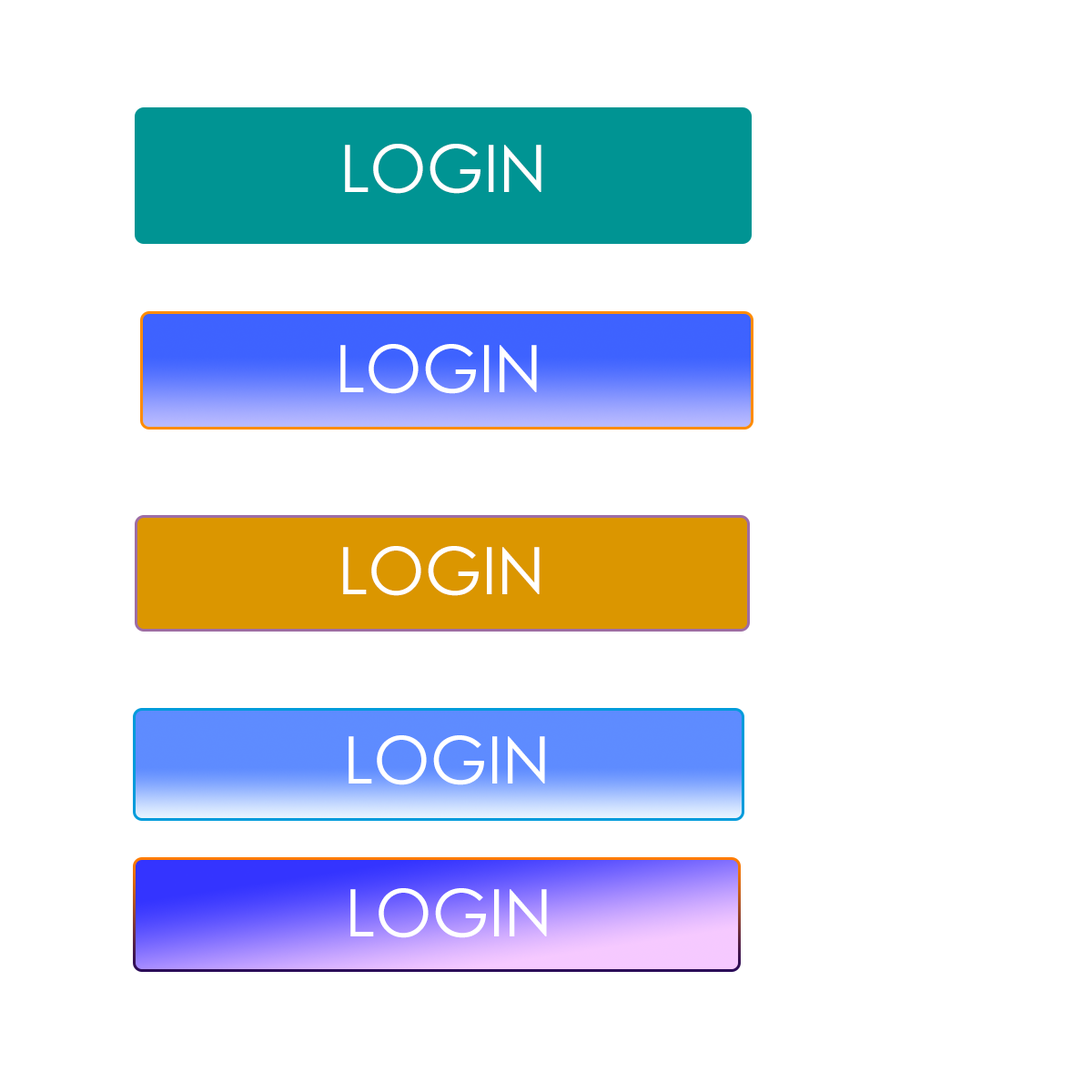
<style>
.page{position:relative;width:1092px;height:1092px;background:#ffffff}
.page>*{position:absolute;margin:0}
.t1{font:65.5px "CenturyGothic";color:#ffffff}
</style>
<div class="page">
<p class="t1" style="left:345px;top:144px;width:196px;height:50px">LOGIN</p>
<p class="t1" style="left:340px;top:344px;width:197px;height:50px">LOGIN</p>
<p class="t1" style="left:343px;top:546px;width:197px;height:50px">LOGIN</p>
<p class="t1" style="left:349px;top:735px;width:196px;height:50px">LOGIN</p>
<p class="t1" style="left:350px;top:888px;width:197px;height:50px">LOGIN</p>
</div>
